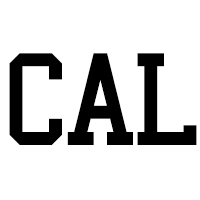
<style>
.page{position:relative;width:200px;height:200px;background:#ffffff}
.page>*{position:absolute;margin:0}
.t1{font:134.3px "College";letter-spacing:-0.06em;color:#000000}
</style>
<div class="page">
<p class="t1" style="left:9px;top:53px;width:188px;height:92px">CAL</p>
</div>
